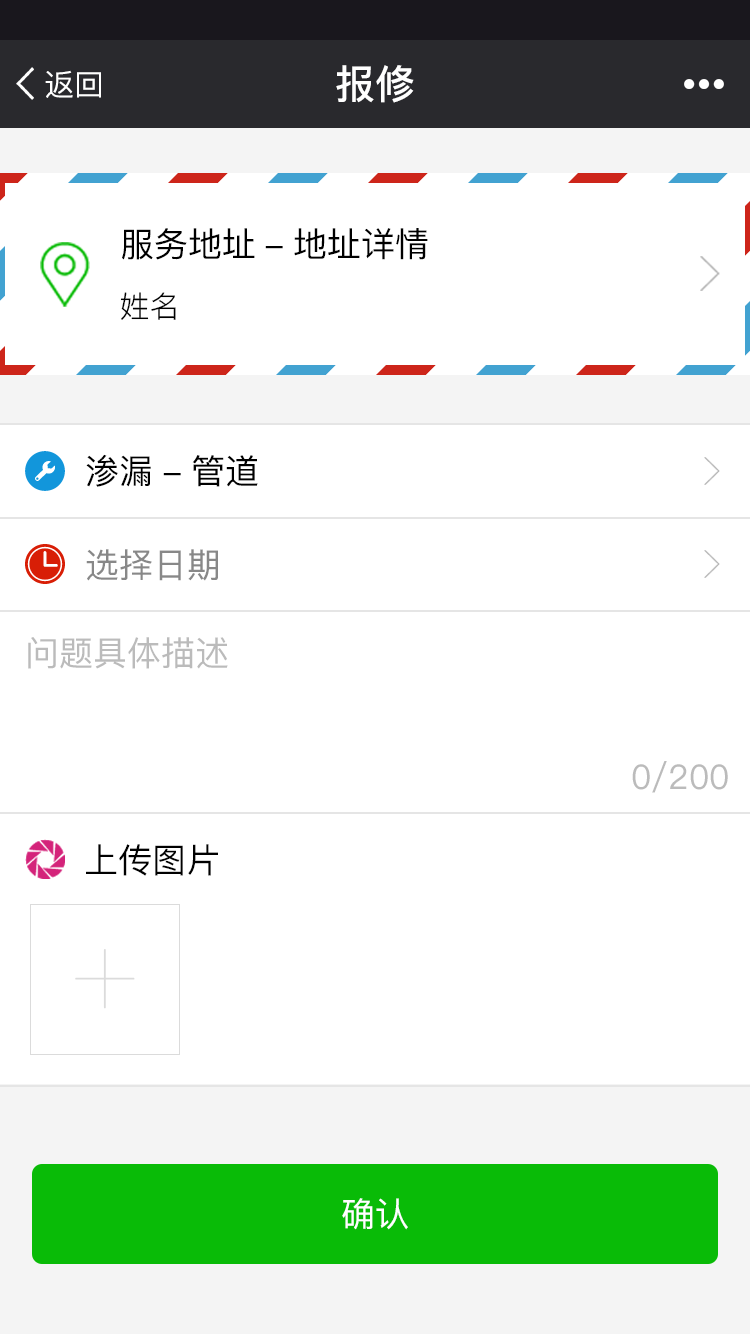
<style>
.page{position:relative;width:750px;height:1334px;background:#ffffff}
.page>*{position:absolute;margin:0}
.t1{font:40px "PingFangSC-Medium";color:#ffffff}
.t2{font:30px "PingFangSC";color:#ffffff}
.t3{font:34px "PingFangSC";color:#000000}
.t4{font:30px "PingFangSC-Light";color:#000000}
.t5{font:34px "PingFangSC";color:#888888}
.t6{font:34px "PingFangSC";color:#bbbbbb}
.t7{font:34px "PingFangSC";color:#ffffff}
</style>
<div class="page">
<p class="t1" style="left:336px;top:65px;width:78px;height:38px">报修</p>
<p class="t2" style="left:45px;top:70px;width:56px;height:28px">返回</p>
<p class="t3" style="left:122px;top:228px;width:306px;height:32px">服务地址-地址详情</p>
<p class="t4" style="left:120px;top:292px;width:56px;height:28px">姓名</p>
<p class="t3" style="left:86px;top:454px;width:172px;height:33px">渗漏-管道</p>
<p class="t5" style="left:86px;top:549px;width:132px;height:32px">选择日期</p>
<p class="t6" style="left:28px;top:637px;width:200px;height:32px">问题具体描述</p>
<p class="t6" style="left:632px;top:761px;width:96px;height:32px">0/200</p>
<p class="t3" style="left:86px;top:844px;width:132px;height:32px">上传图片</p>
<p class="t7" style="left:342px;top:1198px;width:66px;height:32px">确认</p>
</div>
